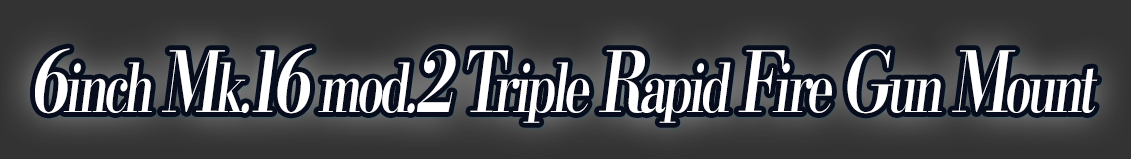
<style>
.page{position:relative;width:1131px;height:159px;background:#333333}
.page>*{position:absolute;margin:0}
.t1{font:67.2px "KochoStd-Heavy";letter-spacing:-0.08em;color:#ffffff;font-style:italic;scale:0.72 1}
.t2{font:84px "KochoStd-Heavy";letter-spacing:-0.08em;color:#ffffff;font-style:italic;scale:0.72 1}
</style>
<div class="page">
<p class="t1" style="left:35px;top:48px;width:1063px;height:75px"><span class="t2">6</span>inch <span class="t2">M</span>k.<span class="t2">16</span> mod.<span class="t2">2 T</span>riple <span class="t2">R</span>apid <span class="t2">F</span>ire <span class="t2">G</span>un <span class="t2">M</span>ount</p>
</div>
